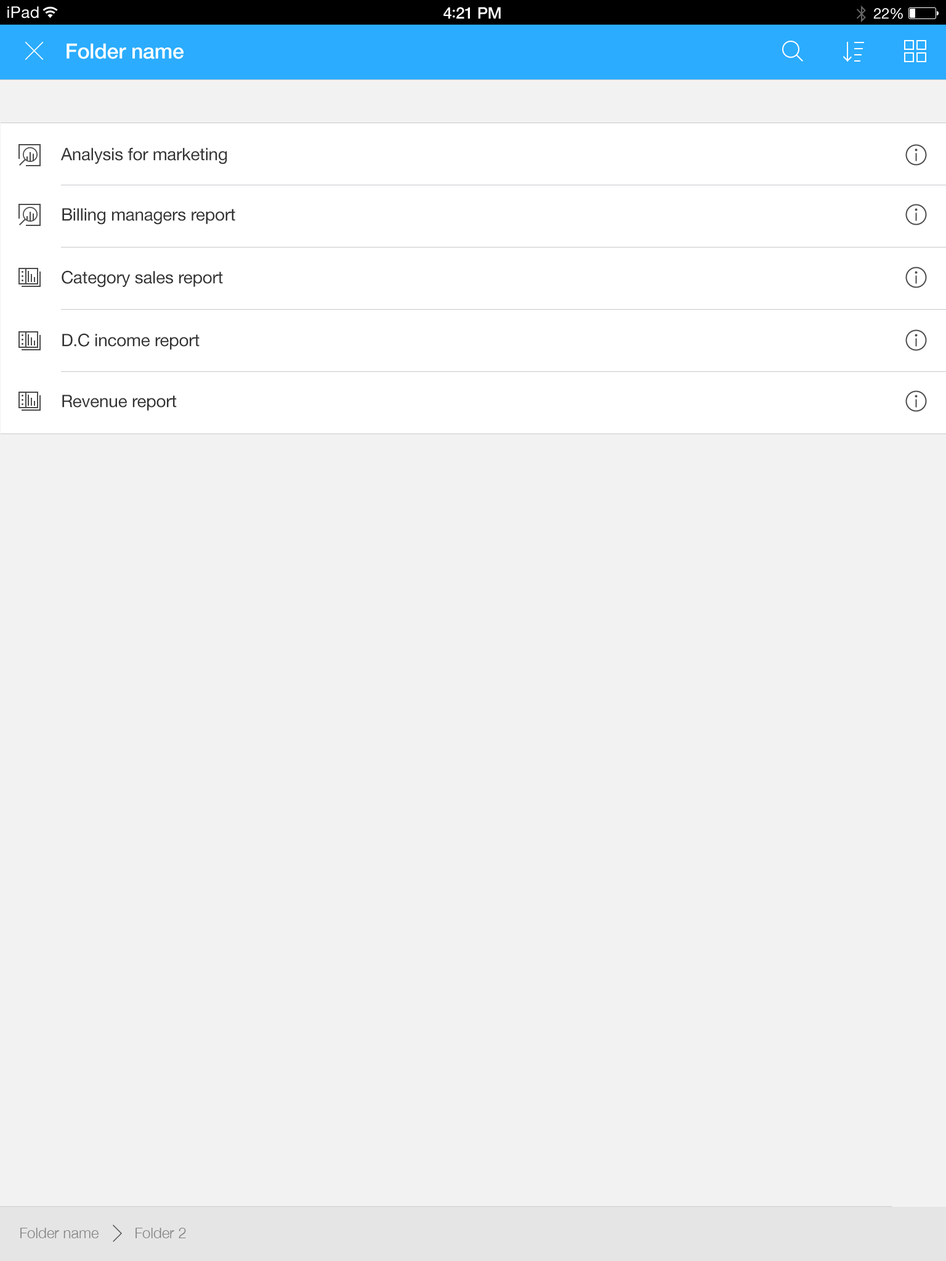
<style>
.page{position:relative;width:946px;height:1261px;background:#f2f2f2}
.page>*{position:absolute;margin:0}
.t1{font:16px "HelveticaNeue";letter-spacing:0.02em;color:#ffffff}
.t2{font:16px "HelveticaNeue-Medium";letter-spacing:-0.02em;color:#ffffff}
.t3{font:16px "Avenir-Medium";letter-spacing:-0.02em;color:#ffffff}
.t4{font:14.8px "HelveticaNeue";letter-spacing:-0.02em;color:#ffffff}
.t5{font:20.9px "HelveticaNeue-Medium";letter-spacing:-0.01em;color:#ffffff}
.t6{font:17.2px "HelveticaNeue";letter-spacing:-0.01em;color:#333333}
.t7{font:14.8px "HelveticaNeue-Light";color:#828282}
</style>
<div class="page">
<p class="t1" style="left:7px;top:6px;width:32px;height:12px">iPad</p>
<p class="t2" style="left:443px;top:7px;width:58px;height:12px">4<span class="t3">:</span>21 PM</p>
<p class="t4" style="left:873px;top:8px;width:30px;height:11px">22%</p>
<p class="t5" style="left:66px;top:43px;width:117px;height:16px">Folder name</p>
<p class="t6" style="left:60px;top:148px;width:167px;height:16px">Analysis for marketing</p>
<p class="t6" style="left:62px;top:208px;width:173px;height:17px">Billing managers report</p>
<p class="t6" style="left:62px;top:270px;width:161px;height:18px">Category sales report</p>
<p class="t6" style="left:62px;top:333px;width:137px;height:17px">D.C income report</p>
<p class="t6" style="left:62px;top:395px;width:115px;height:16px">Revenue report</p>
<p class="t7" style="left:20px;top:1228px;width:79px;height:10px">Folder name</p>
<p class="t7" style="left:135px;top:1228px;width:51px;height:10px">Folder 2</p>
</div>
